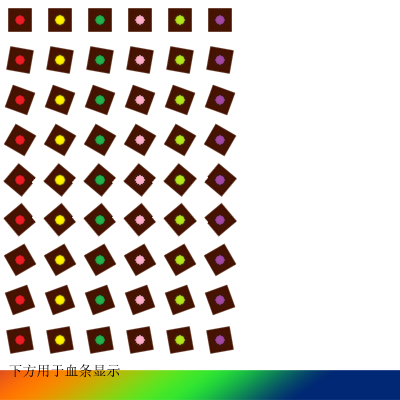
<style>
.page{position:relative;width:400px;height:400px;background:#ffffff}
.page>*{position:absolute;margin:0}
.t1{font:14px "SimSun";color:#000000}
</style>
<div class="page">
<p class="t1" style="left:9px;top:364px;width:111px;height:14px">下方用于血条显示</p>
</div>
